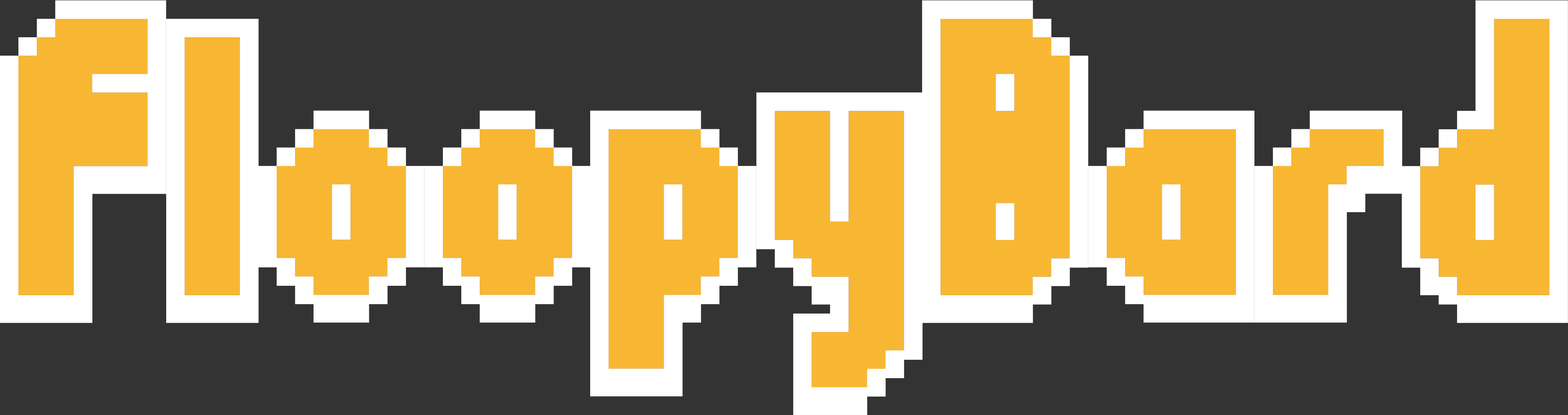
<style>
.page{position:relative;width:1568px;height:415px;background:#333333}
.page>*{position:absolute;margin:0}
.t1{font:590.2px "FlappyBirdy";color:#ffffff}
</style>
<div class="page">
<p class="t1" style="left:0px;top:0px;width:1568px;height:415px">FloopyBard</p>
</div>
